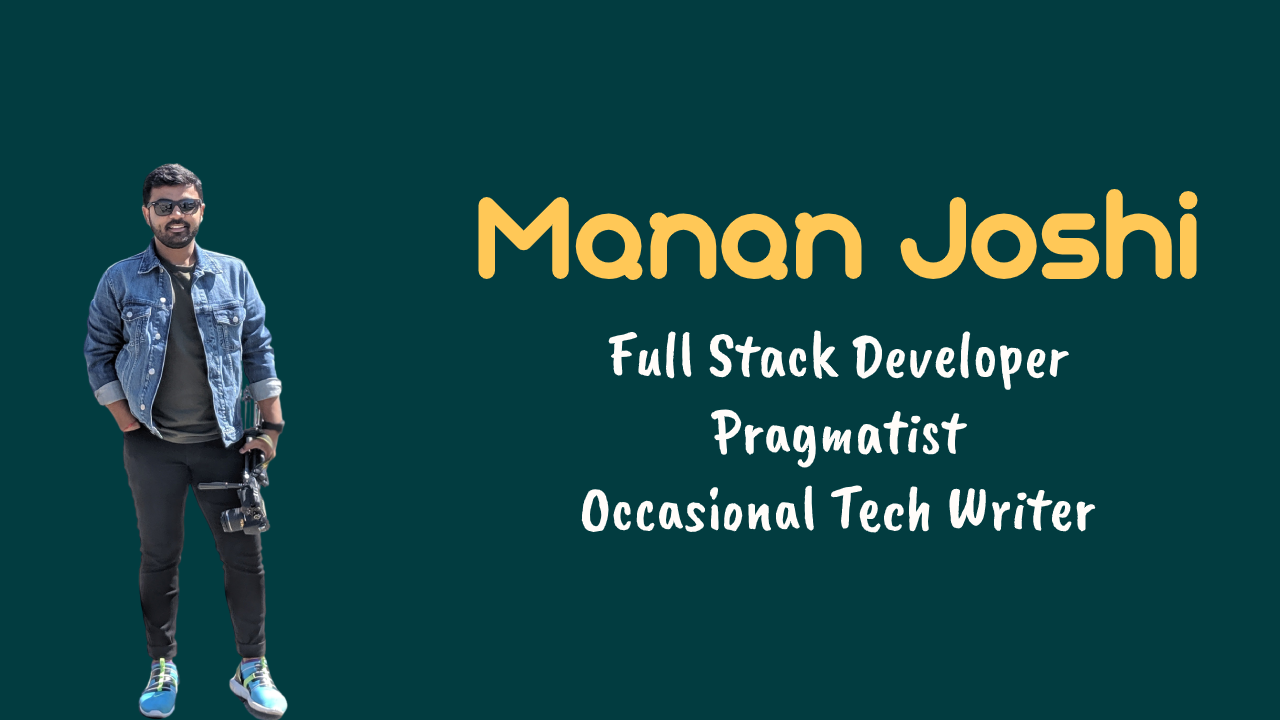
<style>
.page{position:relative;width:1280px;height:720px;background:#023c40}
.page>*{position:absolute;margin:0}
.t1{font:128px "GeometrySoftPro-BoldN";color:#ffc857}
.t2{font:64px "CaveatBrush-Regular";color:#fffcf9}
</style>
<div class="page">
<p class="t1" style="left:478px;top:188px;width:720px;height:93px">Manan Joshi</p>
<p class="t2" style="left:581px;top:330px;width:515px;height:203px;text-align:center">Full Stack Developer<br>Pragmatist<br>Occasional Tech Writer</p>
</div>
